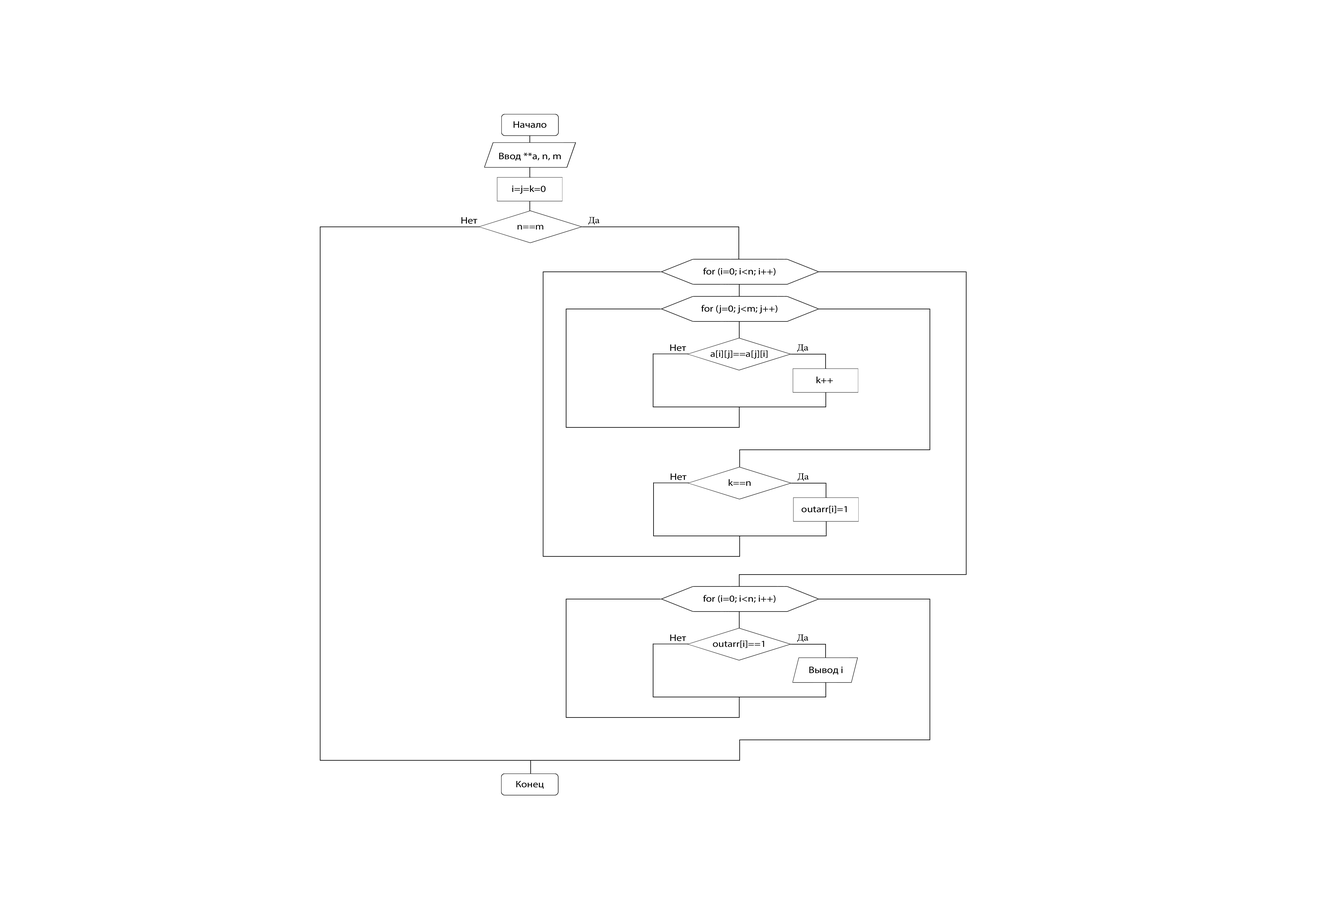
<style>
.page{position:relative;width:1325px;height:900px;background:#ffffff}
.page>*{position:absolute;margin:0}
.t1{font:9.5px "MyriadPro-Regular";color:#000000;scale:1.14 1}
.t2{font:9.3px "MyriadPro-Regular";color:#000000;scale:1.14 1}
.t3{font:9.5px "MyriadPro-Regular";color:#000000;scale:1.13 1}
</style>
<div class="page">
<p class="t1" style="left:513px;top:121px;width:33px;height:7px">Начало</p>
<p class="t1" style="left:499px;top:153px;width:62px;height:8px">Ввод **a, n, m</p>
<p class="t2" style="left:512px;top:185px;width:34px;height:9px">i=j=k=0</p>
<p class="t3" style="left:461px;top:217px;width:16px;height:7px">Нет</p>
<p class="t2" style="left:517px;top:225px;width:26px;height:4px">n==m</p>
<p class="t2" style="left:703px;top:268px;width:72px;height:8px">for (i=0; i&lt;n; i++)</p>
<p class="t2" style="left:701px;top:305px;width:76px;height:9px">for (j=0; j&lt;m; j++)</p>
<p class="t3" style="left:670px;top:344px;width:16px;height:7px">Нет</p>
<p class="t2" style="left:710px;top:350px;width:58px;height:9px">a[i][j]==a[j][i]</p>
<p class="t2" style="left:816px;top:376px;width:17px;height:7px">k++</p>
<p class="t3" style="left:670px;top:473px;width:17px;height:7px">Нет</p>
<p class="t2" style="left:729px;top:479px;width:22px;height:7px">k==n</p>
<p class="t2" style="left:801px;top:506px;width:46px;height:7px">outarr[i]=1</p>
<p class="t2" style="left:703px;top:595px;width:72px;height:8px">for (i=0; i&lt;n; i++)</p>
<p class="t3" style="left:670px;top:634px;width:16px;height:7px">Нет</p>
<p class="t2" style="left:713px;top:640px;width:51px;height:8px">outarr[i]==1</p>
<p class="t1" style="left:809px;top:666px;width:34px;height:9px">Вывод i</p>
<p class="t2" style="left:516px;top:781px;width:28px;height:8px">Конец</p>
</div>
